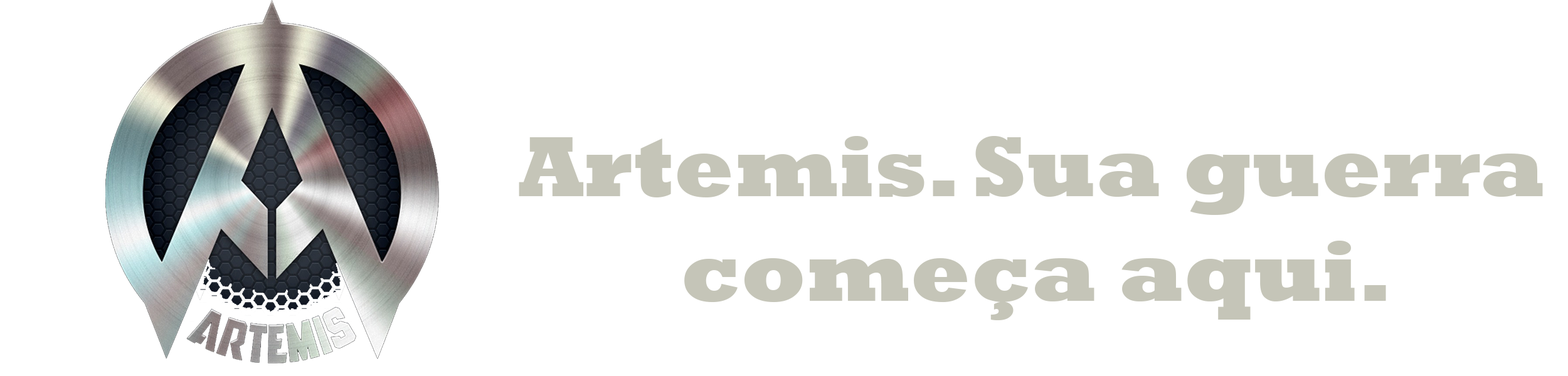
<style>
.page{position:relative;width:1568px;height:376px;background:#ffffff}
.page>*{position:absolute;margin:0}
.t1{font:87.1px "Rockwell-ExtraBold";color:#c6c5b8}
</style>
<div class="page">
<p class="t1" style="left:519px;top:136px;width:1024px;height:184px;text-align:center">Artemis. Sua guerra começa aqui.</p>
</div>
